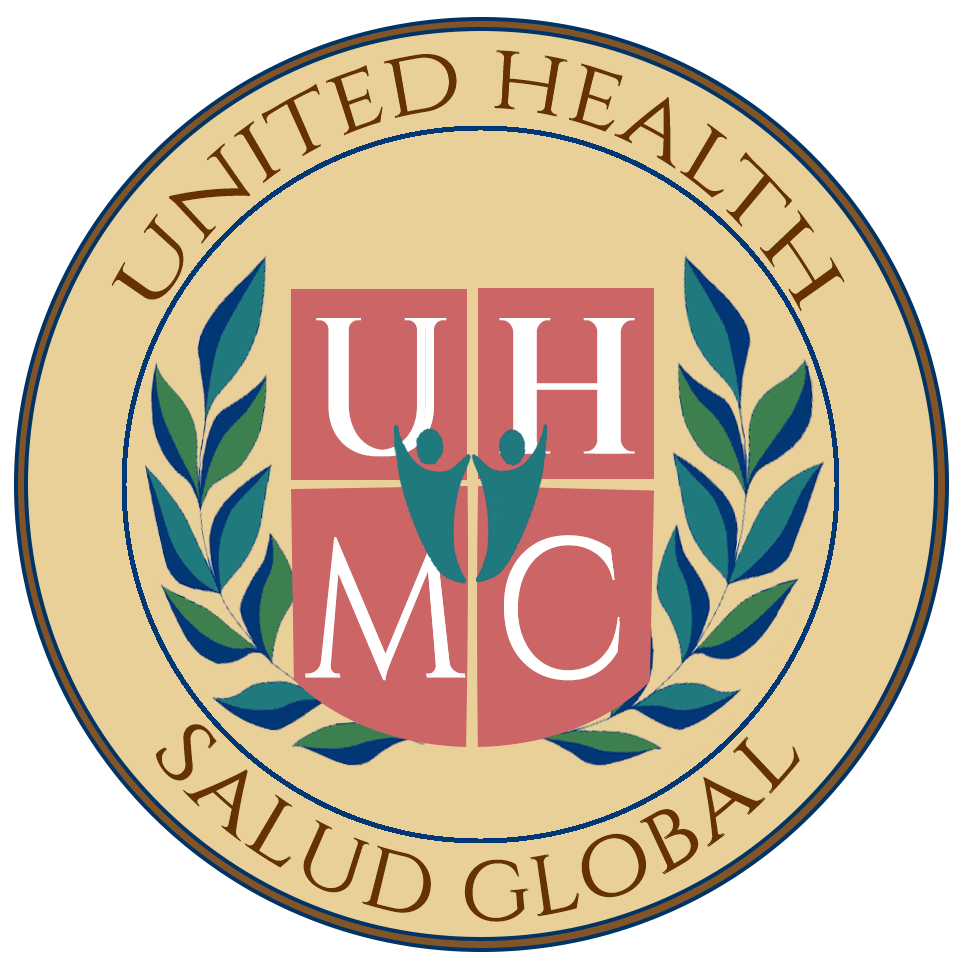
<style>
.page{position:relative;width:968px;height:966px;background:#e9d099}
.page>*{position:absolute;margin:0}
.t1{font:80.9px/48.1px "Cinzel-Regular";letter-spacing:0.02em;color:#663300;scale:0.89 1}
.t2{font:193.4px "Cinzel-Regular";letter-spacing:0.02em;color:#ffffff;scale:0.92 1}
</style>
<div class="page">
<p class="t1" style="left:111px;top:51px;width:734px;height:261px;text-align:center">UNITED HEALTH</p>
<p class="t1" style="left:111px;top:50px;width:734px;height:261px;text-align:center">UNITED HEALTH</p>
<p class="t2" style="left:316px;top:318px;width:122px;height:139px">U</p>
<p class="t2" style="left:324px;top:318px;width:123px;height:139px">U</p>
<p class="t2" style="left:499px;top:318px;width:124px;height:136px">H</p>
<p class="t2" style="left:511px;top:318px;width:124px;height:136px">H</p>
<p class="t2" style="left:305px;top:537px;width:160px;height:142px">M</p>
<p class="t2" style="left:305px;top:539px;width:161px;height:142px">M</p>
<p class="t2" style="left:504px;top:539px;width:116px;height:142px">C</p>
<p class="t2" style="left:504px;top:535px;width:116px;height:142px">C</p>
<p class="t1" style="left:155px;top:724px;width:644px;height:197px;text-align:center">SALUD GLOBAL</p>
<p class="t1" style="left:156px;top:725px;width:644px;height:197px;text-align:center">SALUD GLOBAL</p>
</div>
